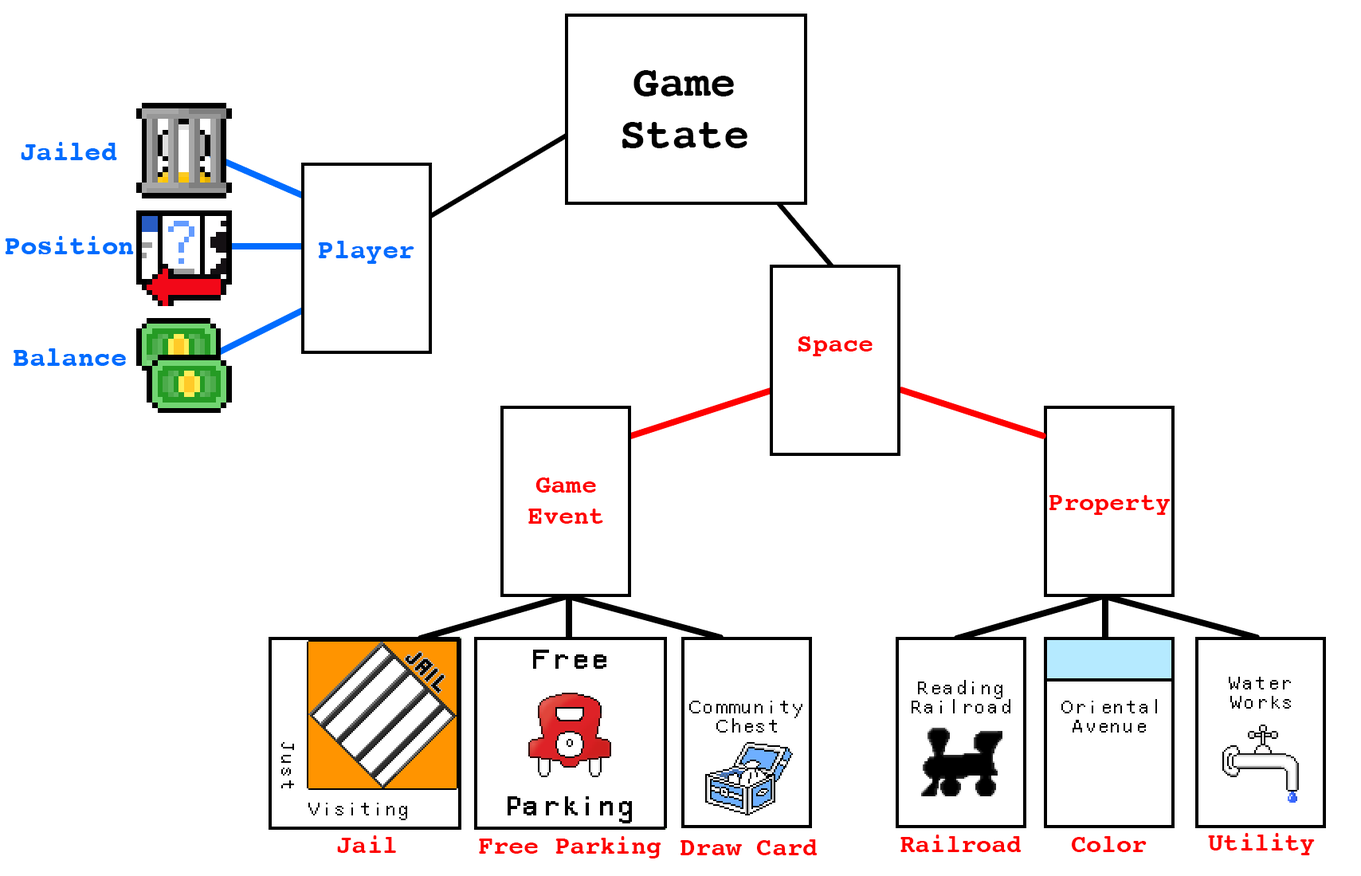
<style>
.page{position:relative;width:1361px;height:876px;background:#ffffff}
.page>*{position:absolute;margin:0}
.t1{font:43px "Courier-Bold";color:#000000}
.t2{font:27.1px "Courier-Bold";color:#006cff}
.t3{font:25.5px "Courier-Bold";color:#ff0000}
.t4{font:25.5px "Courier-Bold";color:#fd0000}
</style>
<div class="page">
<p class="t1" style="left:622px;top:70px;width:126px;height:78px;text-align:center">Game<br>State</p>
<p class="t2" style="left:21px;top:142px;width:96px;height:18px">Jailed</p>
<p class="t2" style="left:5px;top:236px;width:129px;height:18px">Position</p>
<p class="t2" style="left:318px;top:241px;width:96px;height:23px">Player</p>
<p class="t3" style="left:798px;top:336px;width:75px;height:20px">Space</p>
<p class="t2" style="left:14px;top:348px;width:112px;height:18px">Balance</p>
<p class="t3" style="left:528px;top:477px;width:75px;height:47px;text-align:center">Game<br>Event</p>
<p class="t3" style="left:1049px;top:495px;width:122px;height:20px">Property</p>
<p class="t3" style="left:1208px;top:833px;width:107px;height:22px">Utility</p>
<p class="t4" style="left:337px;top:835px;width:59px;height:18px">Jail</p>
<p class="t4" style="left:479px;top:836px;width:183px;height:22px">Free Parking</p>
<p class="t4" style="left:681px;top:839px;width:137px;height:16px">Draw Card</p>
<p class="t3" style="left:901px;top:834px;width:121px;height:18px">Railroad</p>
<p class="t3" style="left:1071px;top:836px;width:76px;height:16px">Color</p>
</div>
